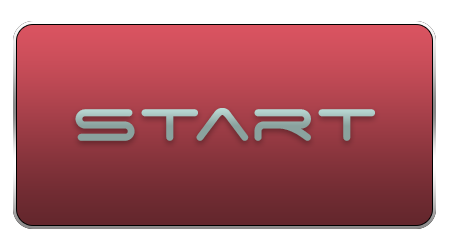
<style>
.page{position:relative;width:450px;height:250px;background:#ffffff}
.page>*{position:absolute;margin:0}
.t1{font:72px "SpaceAge"}
</style>
<div class="page">
<p class="t1" style="left:75px;top:108px;width:300px;height:33px">Start</p>
</div>
